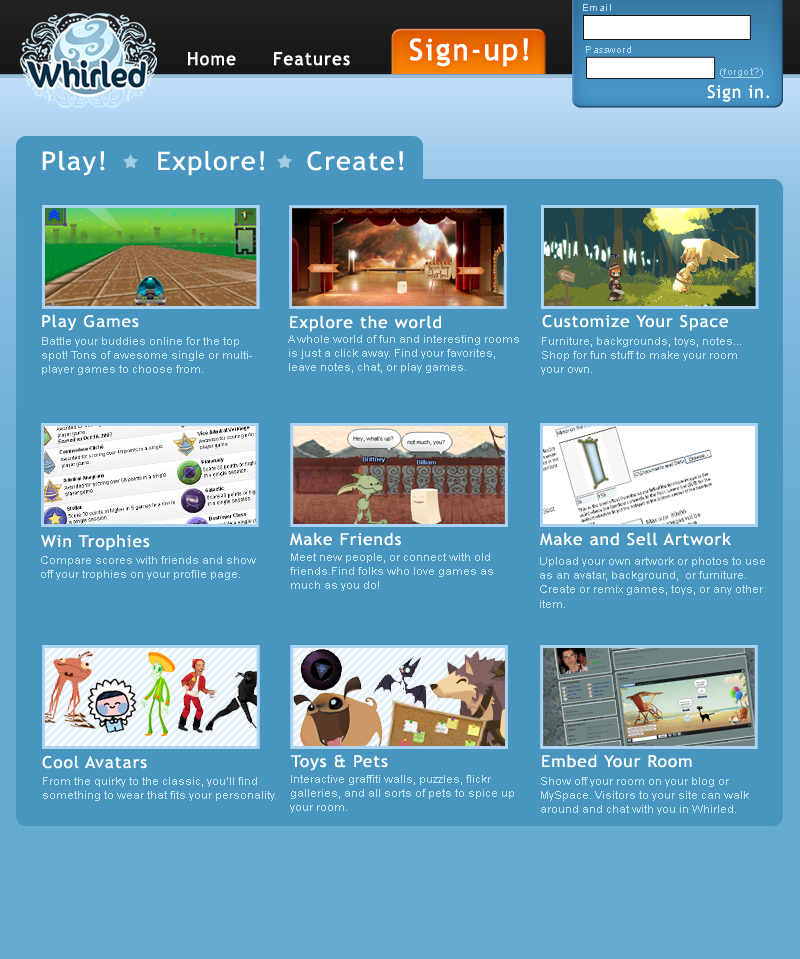
<style>
.page{position:relative;width:800px;height:959px;background:#4896c0}
.page>*{position:absolute;margin:0}
.t1{font:9.8px "ArialMT";letter-spacing:0.05em;color:#bfdcf9}
.t2{font:29.4px "TrebuchetMS";letter-spacing:0.05em;color:#ffffff;font-weight:bold}
.t3{font:17.6px "TrebuchetMS";letter-spacing:0.05em;color:#ffffff;font-weight:bold}
.t4{font:9.8px "ArialMT";letter-spacing:0.05em;color:#aed4eb;text-decoration:underline}
.t5{font:9.8px "ArialMT";letter-spacing:0.05em;color:#aed4eb}
.t6{font:17.6px "TrebuchetMS";letter-spacing:0.05em;color:#ffffff}
.t7{font:25.5px "TrebuchetMS";letter-spacing:0.05em;color:#ffffff;scale:1.07 1}
.t8{font:16.4px "TrebuchetMS";letter-spacing:0.05em;color:#ffffff;scale:1.07 1}
.t9{font:10.9px "ArialMT";color:#c4e3f5;scale:1.07 1}
</style>
<div class="page">
<p class="t1" style="left:583px;top:4px;width:28px;height:7px">Email</p>
<p class="t2" style="left:409px;top:38px;width:120px;height:29px">Sign-up!</p>
<p class="t3" style="left:188px;top:52px;width:48px;height:14px">Home</p>
<p class="t3" style="left:274px;top:52px;width:76px;height:14px">Features</p>
<p class="t1" style="left:586px;top:46px;width:45px;height:7px">Password</p>
<p class="t4" style="left:720px;top:68px;width:43px;height:10px"><span class="t5">(</span>forgot?<span class="t5">)</span></p>
<p class="t6" style="left:707px;top:85px;width:62px;height:17px">Sign in.</p>
<p class="t7" style="left:42px;top:151px;width:362px;height:25px">Play!     Explore!    Create!</p>
<p class="t8" style="left:42px;top:314px;width:97px;height:17px">Play Games</p>
<p class="t8" style="left:290px;top:315px;width:151px;height:17px">Explore the world</p>
<p class="t8" style="left:542px;top:315px;width:186px;height:16px">Customize Your Space</p>
<p class="t9" style="left:42px;top:337px;width:210px;height:38px">Battle your buddies online for the top spot! Tons of awesome single or multiplayer games to choose from.</p>
<p class="t9" style="left:288px;top:335px;width:231px;height:38px">A whole world of fun and interesting rooms is just a click away. Find your favorites, leave notes, chat, or play games.</p>
<p class="t9" style="left:541px;top:337px;width:200px;height:38px">Furniture, backgrounds, toys, notes... Shop for fun stuff to make your room your own.</p>
<p class="t8" style="left:41px;top:534px;width:109px;height:17px">Win Trophies</p>
<p class="t8" style="left:290px;top:532px;width:111px;height:14px">Make Friends</p>
<p class="t8" style="left:540px;top:532px;width:191px;height:14px">Make and Sell Artwork</p>
<p class="t9" style="left:41px;top:556px;width:215px;height:24px">Compare scores with friends and show off your trophies on your profile page.</p>
<p class="t9" style="left:290px;top:553px;width:203px;height:38px">Meet new people, or connect with old friends.Find folks who love games as much as you do!</p>
<p class="t9" style="left:540px;top:557px;width:225px;height:51px">Upload your own artwork or photos to use as an avatar, background,  or furniture. Create or remix games, toys, or any other item.</p>
<p class="t8" style="left:42px;top:755px;width:105px;height:14px">Cool Avatars</p>
<p class="t8" style="left:291px;top:755px;width:97px;height:16px">Toys &amp; Pets</p>
<p class="t8" style="left:542px;top:754px;width:150px;height:14px">Embed Your Room</p>
<p class="t9" style="left:43px;top:777px;width:233px;height:24px">From the quirky to the classic, you’ll find something to wear that fits your personality.</p>
<p class="t9" style="left:290px;top:775px;width:224px;height:38px">Interactive graffiti walls, puzzles, flickr galleries, and all sorts of pets to spice up your room.</p>
<p class="t9" style="left:541px;top:777px;width:208px;height:38px">Show off your room on your blog or MySpace. Visitors to your site can walk around and chat with you in Whirled.</p>
</div>
